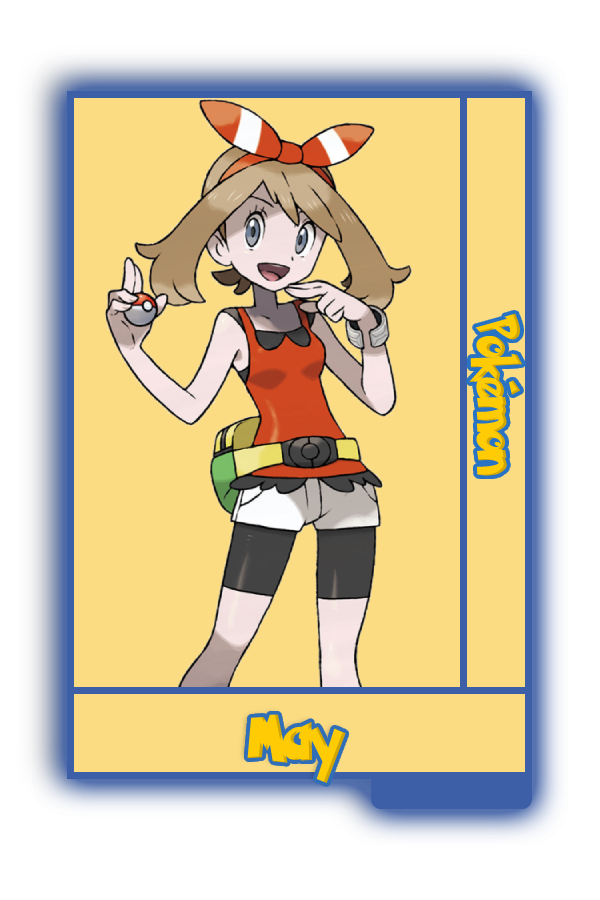
<style>
.page{position:relative;width:600px;height:900px;background:#fbdc83}
.page>*{position:absolute;margin:0}
.t1{font:48.8px "PokemonSolidNormal";color:#ffcb05;scale:0.8 1}
.t2{font:56.6px "PokemonSolidNormal";color:#ffcb05;scale:0.92 1}
</style>
<div class="page">
<p class="t1" style="left:469px;top:313px;width:54px;height:163px;rotate:90deg">Pokémon</p>
<p class="t2" style="left:247px;top:714px;width:99px;height:69px">May</p>
</div>
